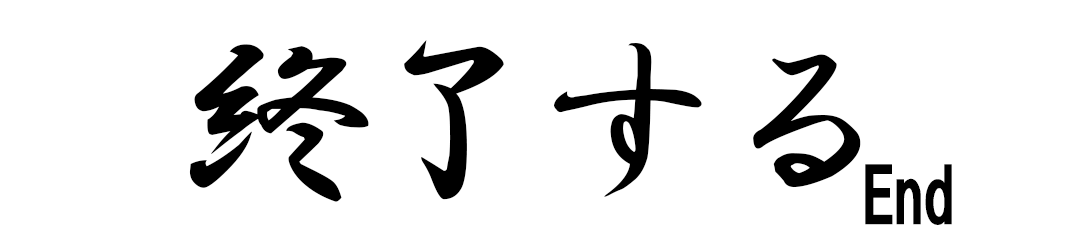
<style>
.page{position:relative;width:1080px;height:240px;background:#ffffff}
.page>*{position:absolute;margin:0}
.t1{font:195.8px "HGSGyoshotai";letter-spacing:-0.1em;color:#000000}
.t2{font:75px "HGSoeiKakugothicUB";letter-spacing:-0.1em;color:#000000}
</style>
<div class="page">
<p class="t1" style="left:189px;top:40px;width:672px;height:162px">終了する</p>
<p class="t2" style="left:865px;top:164px;width:87px;height:61px">End</p>
</div>
